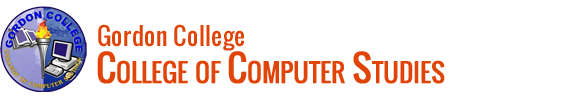
<style>
.page{position:relative;width:567px;height:99px;background:#ffffff}
.page>*{position:absolute;margin:0}
.t1{font:24px "Oswald";letter-spacing:0.025em;color:#e04407}
.t2{font:36px "Oswald";color:#e04407;font-variant:small-caps;font-weight:bold}
</style>
<div class="page">
<p class="t1" style="left:98px;top:24px;width:146px;height:27px">Gordon College</p>
<p class="t2" style="left:97px;top:51px;width:348px;height:33px">College of Computer Studies</p>
</div>
